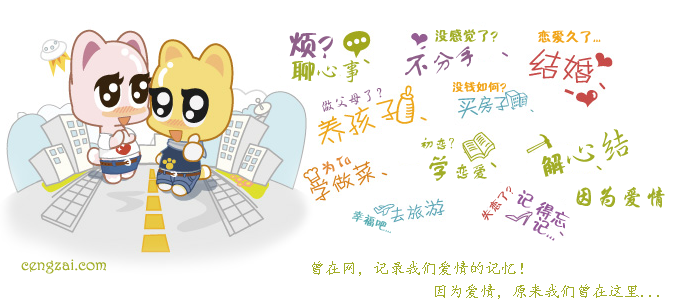
<style>
.page{position:relative;width:686px;height:300px;background:#ffffff}
.page>*{position:absolute;margin:0}
.t1{font:14px "Ftiebihei";color:#a1ad27}
.t2{font:14px "Ftiebihei";color:#f1a418}
.t3{font:30px "Ftiebihei";color:#8f608a}
.t4{font:24px "FZSTK--GBK1-0";color:#8f608a}
.t5{font:30px "FZSTK--GBK1-0";color:#8f608a}
.t6{font:24px "¾­µäÐÐÊé¼ò Regular";color:#a1ad27}
.t7{font:24px "Ftiebihei";color:#a1ad27}
.t8{font:14px "¾­µäÐÐÊé¼ò Regular";color:#92638f}
.t9{font:12px "Ftiebihei";color:#f1a418}
.t10{font:14px "FZSTK--GBK1-0";color:#a1ad27}
.t11{font:36px "¾­µäÐÐÊé¼ò Regular";color:#a1ad27}
.t12{font:14px "Ftiebihei";color:#e28b3b}
.t13{font:18px "FZSTK--GBK1-0";color:#a1ad27}
.t14{font:30px "FZSTK--GBK1-0";color:#a1ad27}
.t15{font:24px "ç»å¸è¡æ¥·ç®-regular";color:#a1ad27}
.t16{font:12px "Ftiebihei";color:#c24b45}
.t17{font:18px/7.6px "Ftiebihei";color:#955999}
.t18{font:12px "Ftiebihei";color:#57acb1}
.t19{font:16px "Harrington";color:#a1ad27}
.t20{font:16px "¿¬Ìå";color:#a1ad27}
</style>
<div class="page">
<p class="t1" style="left:435px;top:29px;width:63px;height:13px">没感觉了？</p>
<p class="t2" style="left:538px;top:30px;width:63px;height:13px">恋爱久了...</p>
<p class="t3" style="left:289px;top:32px;width:44px;height:27px">烦？</p>
<p class="t4" style="left:405px;top:46px;width:69px;height:30px;rotate:-13deg"><span class="t5">不</span>分手</p>
<p class="t6" style="left:291px;top:60px;width:69px;height:23px"><span class="t7">聊</span>心事</p>
<p class="t8" style="left:322px;top:88px;width:60px;height:24px;rotate:-14deg">做父母了？</p>
<p class="t9" style="left:452px;top:81px;width:54px;height:12px">没钱如何？</p>
<p class="t10" style="left:421px;top:137px;width:33px;height:13px">初恋？</p>
<p class="t11" style="left:541px;top:129px;width:88px;height:48px;rotate:-16deg"><span class="t7">解</span>心结</p>
<p class="t12" style="left:322px;top:155px;width:30px;height:20px;rotate:-23deg">为 Ta</p>
<p class="t13" style="left:429px;top:155px;width:58px;height:26px"><span class="t14">学</span>恋爱</p>
<p class="t15" style="left:576px;top:185px;width:89px;height:23px">因为爱情</p>
<p class="t16" style="left:481px;top:186px;width:32px;height:35px;rotate:-48deg">失恋了？</p>
<p class="t17" style="left:517px;top:190px;width:53px;height:51px;rotate:30deg">记 得忘<br>      记...</p>
<p class="t18" style="left:352px;top:211px;width:39px;height:23px;rotate:21deg">幸福吧...</p>
<p class="t19" style="left:21px;top:259px;width:85px;height:15px">cengzai.com</p>
<p class="t20" style="left:312px;top:261px;width:211px;height:15px">曾在网，记录我们爱情的记忆！</p>
<p class="t20" style="left:435px;top:284px;width:224px;height:15px">因为爱情，原来我们曾在这里...</p>
</div>
